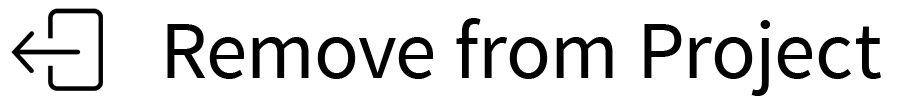
<style>
.page{position:relative;width:900px;height:100px;background:#ffffff}
.page>*{position:absolute;margin:0}
.t1{font:83.3px "SourceSansPro-Regular";letter-spacing:0.01em;color:#000000}
</style>
<div class="page">
<p class="t1" style="left:167px;top:18px;width:714px;height:78px">Remove from Project</p>
</div>
